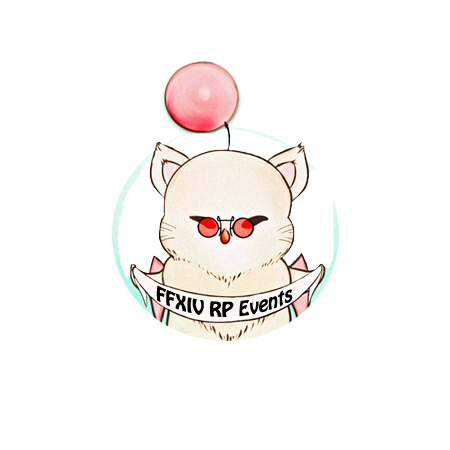
<style>
.page{position:relative;width:450px;height:450px;background:#ffffff}
.page>*{position:absolute;margin:0}
.t1{font:17.9px "HoboStd";color:#000000}
</style>
<div class="page">
<p class="t1" style="left:156px;top:285px;width:137px;height:32px;text-align:center">FFXIV RP Events</p>
</div>
